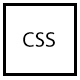
<style>
.page{position:relative;width:80px;height:80px;background:#ffffff}
.page>*{position:absolute;margin:0}
.t1{font:21px "MyriadPro-Regular";color:#000000}
</style>
<div class="page">
<p class="t1" style="left:23px;top:32px;width:32px;height:15px">CSS</p>
</div>
